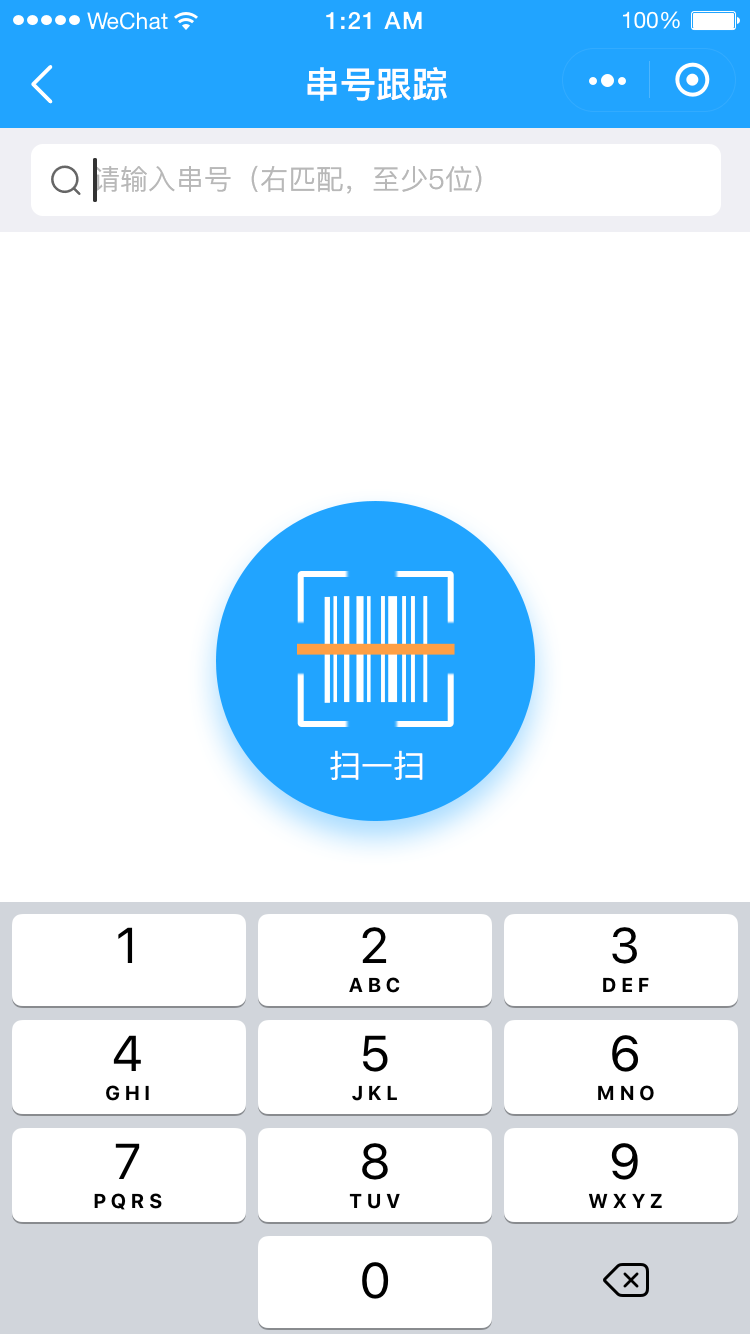
<style>
.page{position:relative;width:750px;height:1334px;background:#ffffff}
.page>*{position:absolute;margin:0}
.t1{font:36px "PingFang-SC-Bold";color:#ffffff}
.t2{font:28px "PingFang-SC-Medium";color:#b8b8b8}
.t3{font:32px "PingFang-SC-Medium";color:#ffffff}
</style>
<div class="page">
<p class="t1" style="left:307px;top:67px;width:140px;height:34px">串号跟踪</p>
<p class="t2" style="left:93px;top:165px;width:389px;height:29px">请输入串号（右匹配，至少5位）</p>
<p class="t3" style="left:330px;top:750px;width:93px;height:30px">扫一扫</p>
</div>
